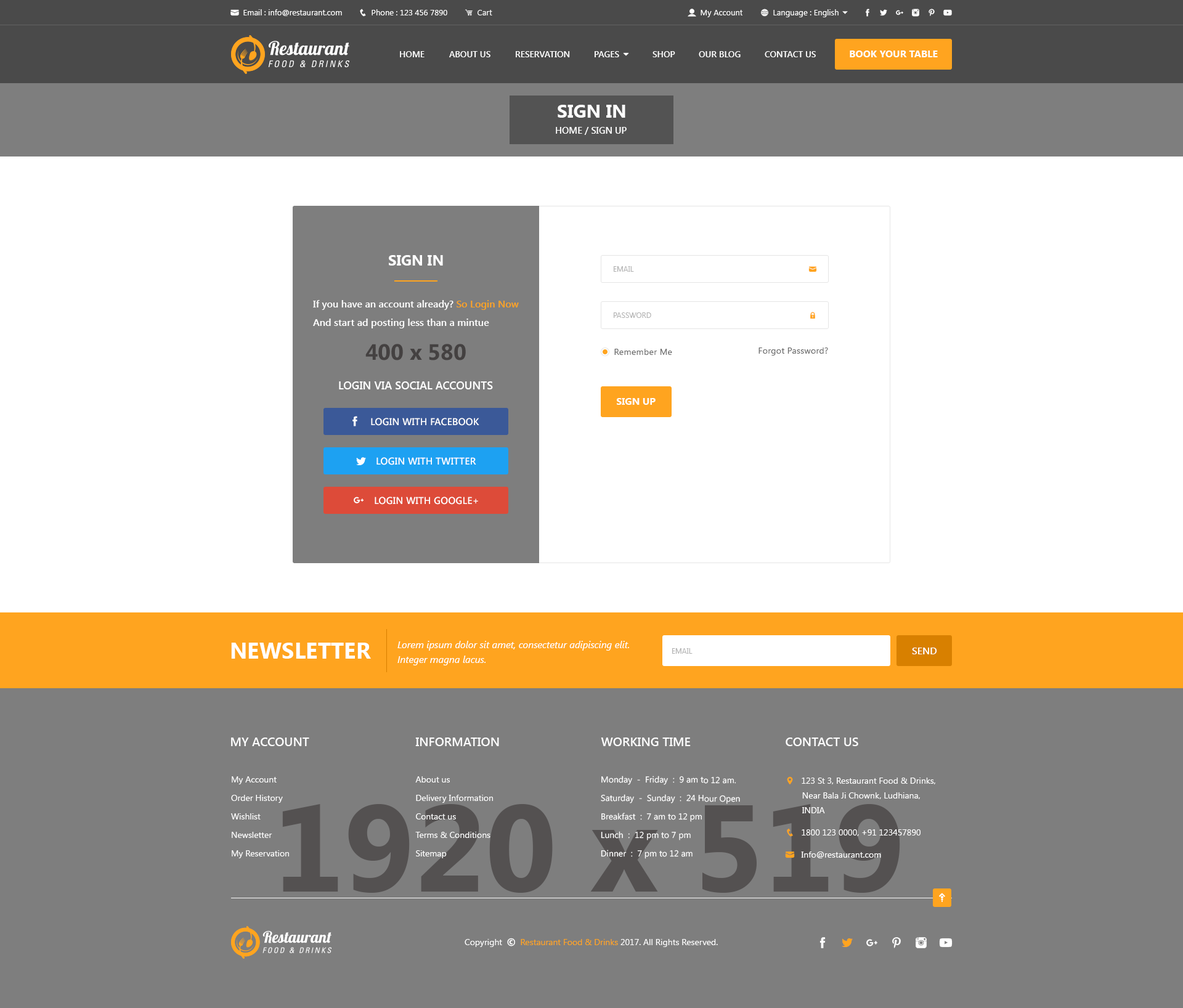
<style>
.page{position:relative;width:1183px;height:1008px;background:#7e7e7e}
.page>*{position:absolute;margin:0}
.t1{font:8.6px "SegoeUI-SemiBold";color:#ffffff}
.t2{font:9.9px "SegoeUI-Bold";color:#ffffff}
.t3{font:18.5px "SegoeUI-Bold";color:#ffffff}
.t4{font:9.2px "SegoeUI-SemiBold";color:#ffffff}
.t5{font:14.8px "SegoeUI-Bold";color:#ffffff}
.t6{font:7.4px "SegoeUI";color:#b2b2b2}
.t7{font:9.9px "SegoeUI-SemiBold";color:#ffffff}
.t8{font:9.9px "SegoeUI-SemiBold";color:#ffa41f}
.t9{font:22.2px "SegoeUI-Bold";color:#444141}
.t10{font:8.6px "SegoeUI";letter-spacing:0.025em;color:#686868}
.t11{font:11.1px "SegoeUI-SemiBold";color:#ffffff;text-transform:uppercase}
.t12{font:9.9px "SegoeUI-SemiBold";color:#ffffff;text-transform:uppercase}
.t13{font:9.9px/14.8px "SegoeUI-Italic";color:#ffffff}
.t14{font:22.2px "SegoeUI-Bold";color:#ffffff}
.t15{font:7.4px "SegoeUI";color:#b2b2b2;text-transform:uppercase}
.t16{font:12.3px "SegoeUI-SemiBold";color:#ffffff}
.t17{font:8.6px/18.5px "SegoeUI";color:#ffffff}
.t18{font:123.2px "SegoeUI-Bold";color:#545151}
</style>
<div class="page">
<p class="t1" style="left:400px;top:51px;width:25px;height:6px">HOME</p>
<p class="t1" style="left:449px;top:51px;width:41px;height:6px">ABOUT US</p>
<p class="t1" style="left:516px;top:51px;width:54px;height:6px">RESERVATION</p>
<p class="t1" style="left:652px;top:51px;width:23px;height:6px">SHOP</p>
<p class="t1" style="left:699px;top:51px;width:42px;height:6px">OUR BLOG</p>
<p class="t1" style="left:765px;top:51px;width:51px;height:6px">CONTACT US</p>
<p class="t2" style="left:850px;top:51px;width:88px;height:6px">BOOK YOUR TABLE</p>
<p class="t3" style="left:558px;top:105px;width:67px;height:13px">SIGN IN</p>
<p class="t4" style="left:556px;top:127px;width:71px;height:8px">HOME / SIGN UP</p>
<p class="t5" style="left:389px;top:255px;width:54px;height:11px">SIGN IN</p>
<p class="t6" style="left:614px;top:266px;width:20px;height:6px">EMAIL</p>
<p class="t7" style="left:313px;top:300px;width:206px;height:10px">If you have an account already? <span class="t8">So Login Now</span></p>
<p class="t6" style="left:614px;top:312px;width:37px;height:6px">PASSWORD</p>
<p class="t7" style="left:313px;top:319px;width:176px;height:9px">And start ad posting less than a mintue</p>
<p class="t9" style="left:365px;top:344px;width:101px;height:16px">400 x 580</p>
<p class="t10" style="left:614px;top:349px;width:58px;height:6px">Remember Me</p>
<p class="t10" style="left:758px;top:347px;width:70px;height:9px">Forgot Password?</p>
<p class="t11" style="left:339px;top:381px;width:154px;height:8px">Login Via Social Accounts</p>
<p class="t2" style="left:617px;top:398px;width:39px;height:7px">SIGN UP</p>
<p class="t12" style="left:371px;top:418px;width:108px;height:8px">Login with Facebook</p>
<p class="t12" style="left:376px;top:457px;width:100px;height:8px">Login with Twitter</p>
<p class="t12" style="left:375px;top:497px;width:103px;height:8px">Login with Google+</p>
<p class="t13" style="left:397px;top:641px;width:232px;height:24px">Lorem ipsum dolor sit amet, consectetur adipiscing elit. Integer magna lacus.</p>
<p class="t14" style="left:231px;top:643px;width:140px;height:16px">NEWSLETTER</p>
<p class="t15" style="left:672px;top:648px;width:21px;height:6px">Email</p>
<p class="t7" style="left:912px;top:648px;width:25px;height:6px">SEND</p>
<p class="t16" style="left:231px;top:738px;width:78px;height:8px">MY ACCOUNT</p>
<p class="t16" style="left:415px;top:738px;width:84px;height:8px">INFORMATION</p>
<p class="t16" style="left:601px;top:738px;width:90px;height:8px">WORKING TIME</p>
<p class="t16" style="left:786px;top:738px;width:72px;height:8px">CONTACT US</p>
<p class="t17" style="left:231px;top:776px;width:58px;height:82px">My Account<br>Order History<br>Wishlist<br>Newsletter<br>My Reservation</p>
<p class="t17" style="left:415px;top:776px;width:78px;height:82px">About us<br>Delivery Information<br>Contact us<br>Terms &amp; Conditions<br>Sitemap</p>
<p class="t17" style="left:601px;top:776px;width:139px;height:83px">Monday  -  Friday  :  9 am to 12 am.<br>Saturday  -  Sunday  :  24 Hour Open<br>Breakfast  :  7 am to 12 pm<br>Lunch  :  12 pm to 7 pm<br>Dinner  :  7 pm to 12 am</p>
<p class="t18" style="left:282px;top:804px;width:618px;height:89px">1920 x 519</p>
</div>
